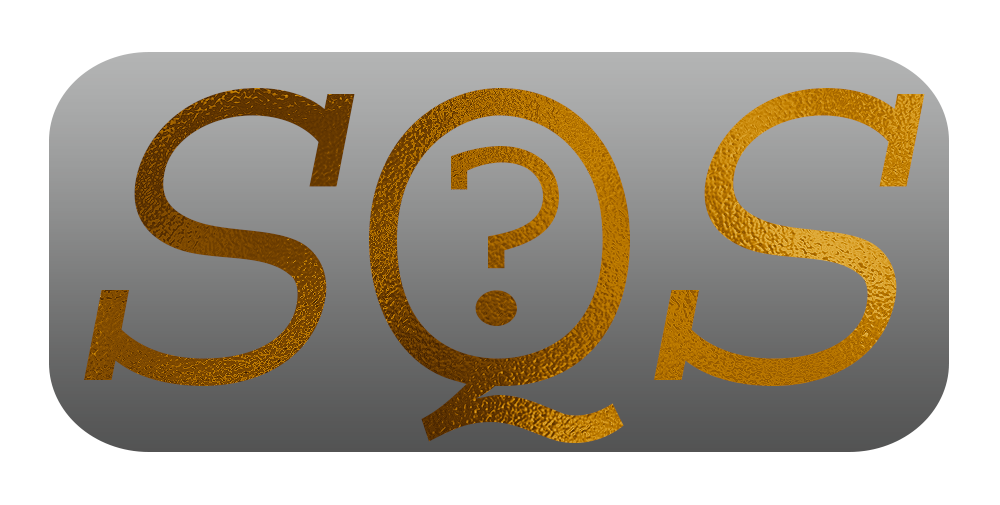
<style>
.page{position:relative;width:1000px;height:505px;background:#ffffff}
.page>*{position:absolute;margin:0}
.t1{font:500px "CourierStd-Oblique"}
.t2{font:500px "CourierStd";letter-spacing:-0.06em}
.t3{font:300px "CourierStd";letter-spacing:-0.06em}
</style>
<div class="page">
<p class="t1" style="left:84px;top:88px;width:841px;height:355px">S<span class="t2">Q</span>S</p>
<p class="t3" style="left:451px;top:146px;width:108px;height:181px">?</p>
</div>
